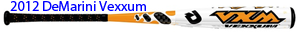
<style>
.page{position:relative;width:300px;height:32px;background:#ffffff}
.page>*{position:absolute;margin:0}
.t1{font:14px "MyriadPro-Regular";color:#0000ff}
</style>
<div class="page">
<p class="t1" style="left:10px;top:1px;width:136px;height:10px">2012 DeMarini Vexxum</p>
</div>
